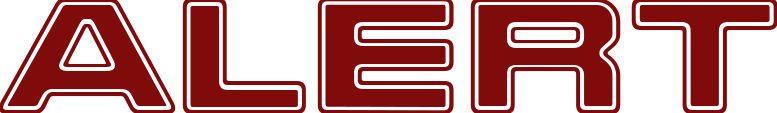
<style>
.page{position:relative;width:777px;height:113px;background:#ffffff}
.page>*{position:absolute;margin:0}
.t1{font:165.8px "FederationStarFleet";color:#7f0b0b}
</style>
<div class="page">
<p class="t1" style="left:0px;top:0px;width:778px;height:114px">ALERT</p>
</div>
